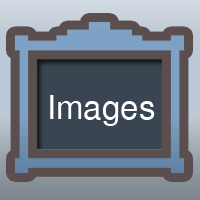
<style>
.page{position:relative;width:200px;height:200px;background:#394551}
.page>*{position:absolute;margin:0}
.t1{font:33.4px "KhmerOS";color:#ffffff}
</style>
<div class="page">
<p class="t1" style="left:50px;top:95px;width:105px;height:31px">Images</p>
</div>
